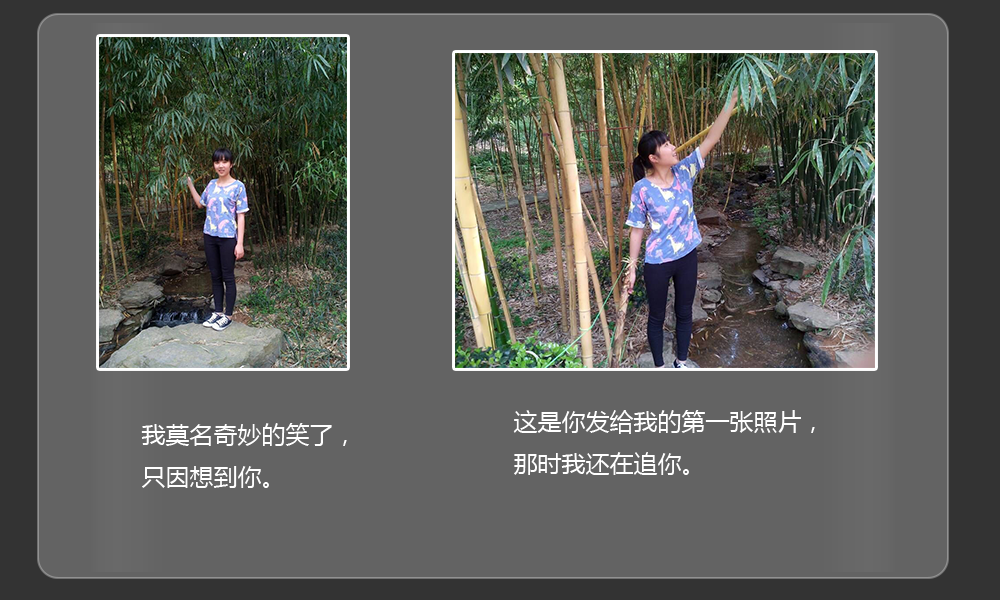
<style>
.page{position:relative;width:1000px;height:600px;background:#636363}
.page>*{position:absolute;margin:0}
.t1{font:24px "MicrosoftYaHei";color:#ffffff}
</style>
<div class="page">
<p class="t1" style="left:513px;top:410px;width:302px;height:65px">这是你发给我的第一张照片，<br>那时我还在追你。</p>
<p class="t1" style="left:141px;top:423px;width:206px;height:65px">我莫名奇妙的笑了，<br>只因想到你。</p>
</div>
